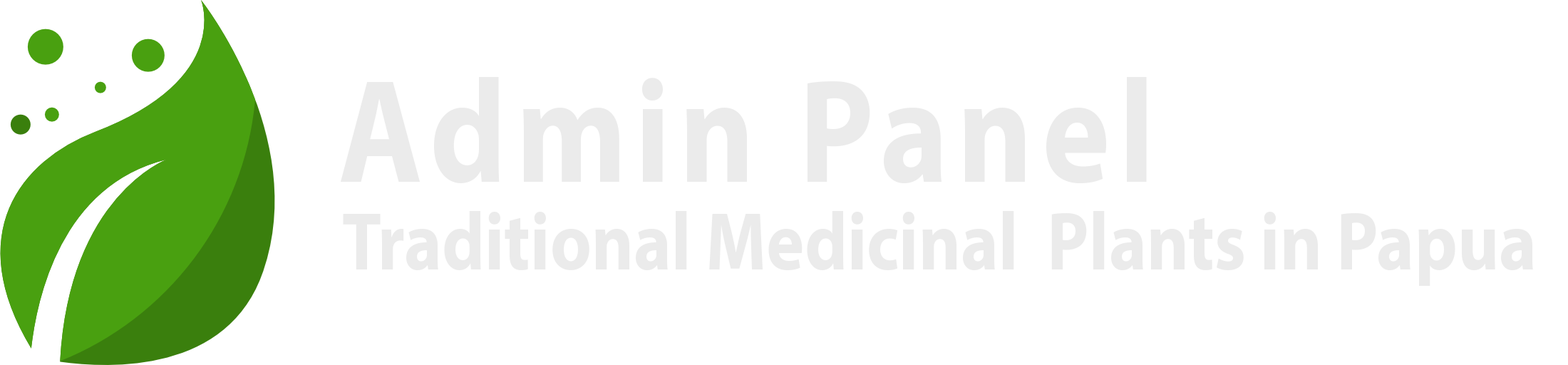
<style>
.page{position:relative;width:1568px;height:365px;background:#ffffff}
.page>*{position:absolute;margin:0}
.t1{font:148px "MyriadPro-Bold";letter-spacing:0.07em;color:#ebebeb;scale:0.87 1}
.t2{font:82.5px "MyriadPro-Bold";color:#ebebeb;scale:0.87 1}
</style>
<div class="page">
<p class="t1" style="left:341px;top:77px;width:806px;height:107px">Admin Panel</p>
<p class="t2" style="left:343px;top:211px;width:1190px;height:75px">Traditional Medicinal  Plants in Papua</p>
</div>
